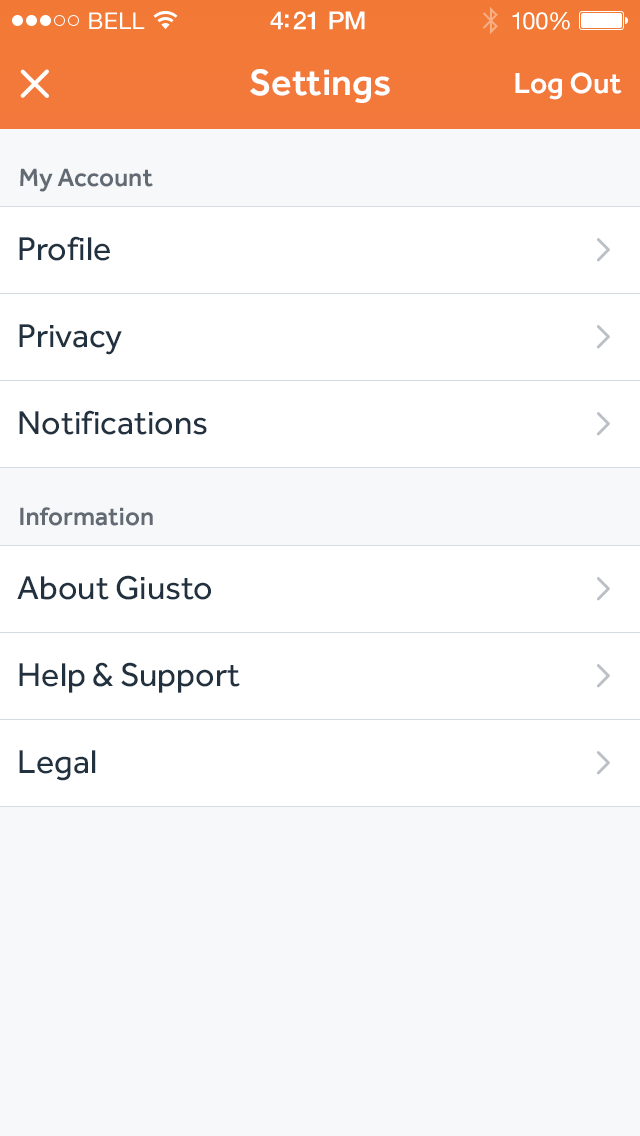
<style>
.page{position:relative;width:640px;height:1136px;background:#f6f8fa}
.page>*{position:absolute;margin:0}
.t1{font:23px "HelveticaNeue";letter-spacing:0.02em;color:#ffffff}
.t2{font:25px "HelveticaNeue-Medium";letter-spacing:-0.02em;color:#ffffff}
.t3{font:24px "HelveticaNeue";letter-spacing:-0.02em;color:#ffffff}
.t4{font:38px "Effra-Medium";color:#ffffff}
.t5{font:30px "Effra-Medium";color:#ffffff}
.t6{font:26px "Effra-Medium";color:#626a73}
.t7{font:34px "Effra-Regular";color:#22313f}
</style>
<div class="page">
<p class="t1" style="left:89px;top:12px;width:56px;height:17px">BELL</p>
<p class="t2" style="left:270px;top:11px;width:95px;height:19px">4:21 PM</p>
<p class="t3" style="left:512px;top:12px;width:58px;height:18px">100%</p>
<p class="t4" style="left:250px;top:69px;width:140px;height:34px">Settings</p>
<p class="t5" style="left:515px;top:72px;width:107px;height:28px">Log Out</p>
<p class="t6" style="left:20px;top:168px;width:133px;height:24px">My Account</p>
<p class="t7" style="left:19px;top:236px;width:91px;height:25px">Profile</p>
<p class="t7" style="left:19px;top:324px;width:103px;height:31px">Privacy</p>
<p class="t7" style="left:19px;top:410px;width:188px;height:25px">Notifications</p>
<p class="t6" style="left:20px;top:507px;width:133px;height:19px">Information</p>
<p class="t7" style="left:17px;top:575px;width:194px;height:25px">About Giusto</p>
<p class="t7" style="left:19px;top:662px;width:221px;height:31px">Help &amp; Support</p>
<p class="t7" style="left:19px;top:750px;width:77px;height:31px">Legal</p>
</div>
